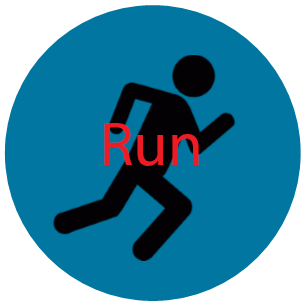
<style>
.page{position:relative;width:305px;height:306px;background:#0076a0}
.page>*{position:absolute;margin:0}
.t1{font:62.5px "MyriadPro-Regular";color:#ed1c24}
</style>
<div class="page">
<p class="t1" style="left:104px;top:123px;width:95px;height:43px">Run</p>
</div>
